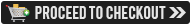
<style>
.page{position:relative;width:191px;height:25px;background:#1f1f1f}
.page>*{position:absolute;margin:0}
.t1{font:14px "Bebas";letter-spacing:0.01em;color:#e6e6e6}
</style>
<div class="page">
<p class="t1" style="left:35px;top:6px;width:131px;height:13px">proceed  to  checkout</p>
</div>
